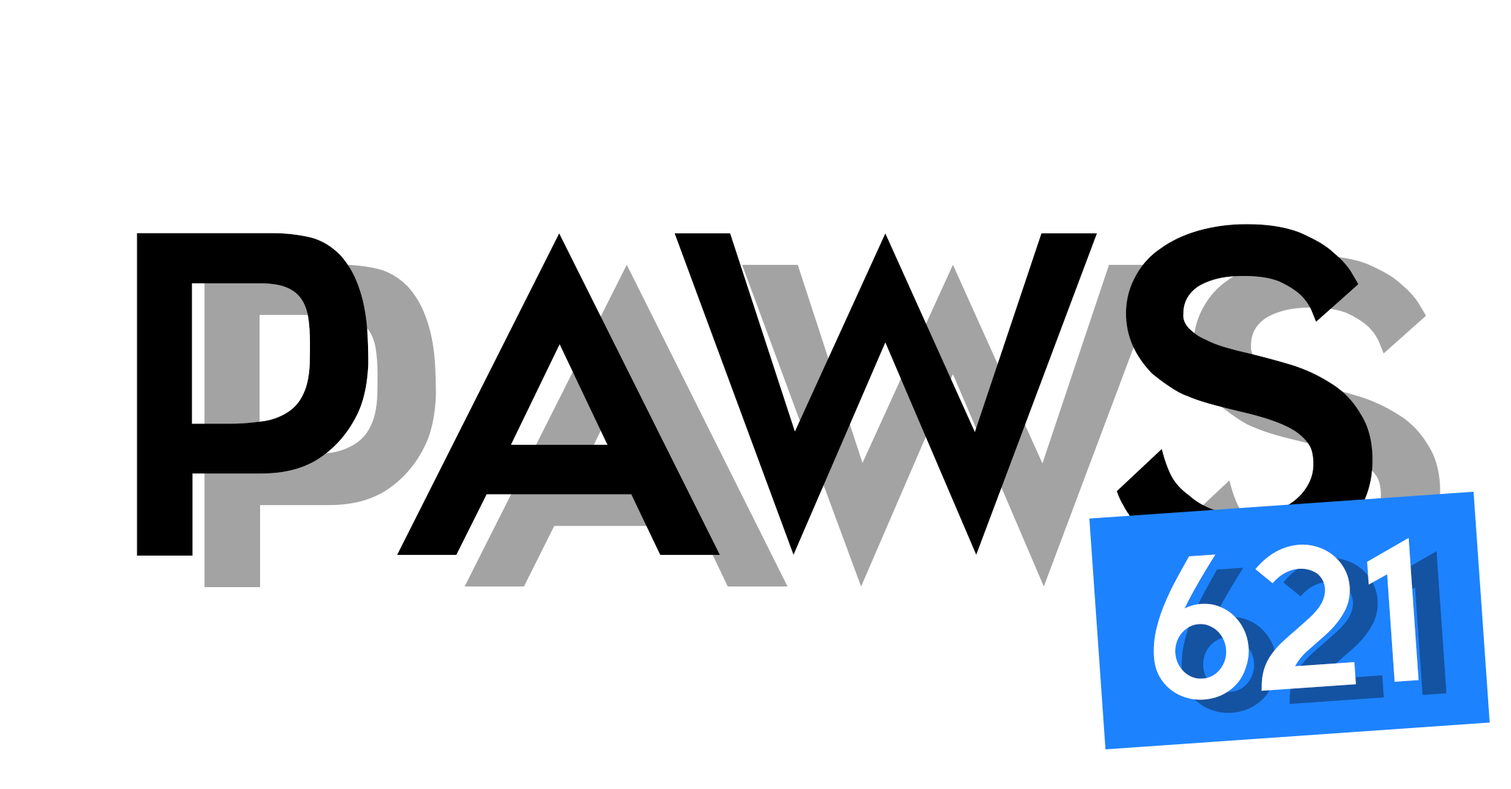
<style>
.page{position:relative;width:1511px;height:789px;background:#ffffff}
.page>*{position:absolute;margin:0}
.t1{font:459px "bureaugroteskvivalettersfixed";color:#000000}
.t2{font:198.9px "bureaugroteskvivalettersfixed";color:#ffffff}
</style>
<div class="page">
<p class="t1" style="left:137px;top:224px;width:1235px;height:342px">PAWS</p>
<p class="t2" style="left:1153px;top:538px;width:266px;height:163px;rotate:-4deg">621</p>
</div>
